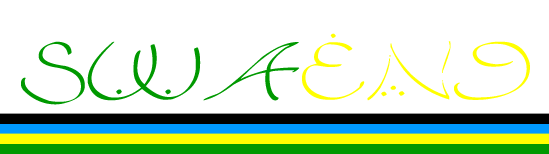
<style>
.page{position:relative;width:549px;height:154px;background:#ffffff}
.page>*{position:absolute;margin:0}
.t1{font:83.3px "Bizancia";letter-spacing:0.04em;color:#009900;text-transform:uppercase}
.t2{font:83.3px "Bizancia";letter-spacing:0.04em;color:#ffff00;text-transform:uppercase}
</style>
<div class="page">
<p class="t1" style="left:21px;top:33px;width:509px;height:72px">SWA<span class="t2">ENG</span></p>
</div>
